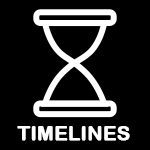
<style>
.page{position:relative;width:150px;height:150px;background:#000000}
.page>*{position:absolute;margin:0}
.t1{font:20px "ArialRoundedMTBold";letter-spacing:-0.005em;color:#ffffff;text-transform:uppercase;font-weight:bold}
</style>
<div class="page">
<p class="t1" style="left:17px;top:126px;width:113px;height:15px">TimeLines</p>
</div>
